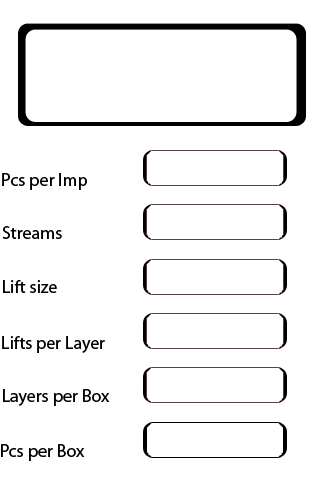
<style>
.page{position:relative;width:320px;height:480px;background:#ffffff}
.page>*{position:absolute;margin:0}
.t1{font:18px "MyriadPro-Regular";color:#000000}
</style>
<div class="page">
<p class="t1" style="left:2px;top:173px;width:85px;height:17px">Pcs per Imp</p>
<p class="t1" style="left:2px;top:226px;width:60px;height:13px">Streams</p>
<p class="t1" style="left:3px;top:280px;width:54px;height:13px">Lift size</p>
<p class="t1" style="left:2px;top:336px;width:103px;height:17px">Lifts per Layer</p>
<p class="t1" style="left:3px;top:389px;width:107px;height:17px">Layers per Box</p>
<p class="t1" style="left:1px;top:444px;width:84px;height:17px">Pcs per Box</p>
</div>
